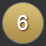
<style>
.page{position:relative;width:46px;height:46px;background:#333333}
.page>*{position:absolute;margin:0}
.t1{font:20px "Helvetica";color:#ffffff}
</style>
<div class="page">
<p class="t1" style="left:17px;top:15px;width:11px;height:15px">6</p>
</div>
